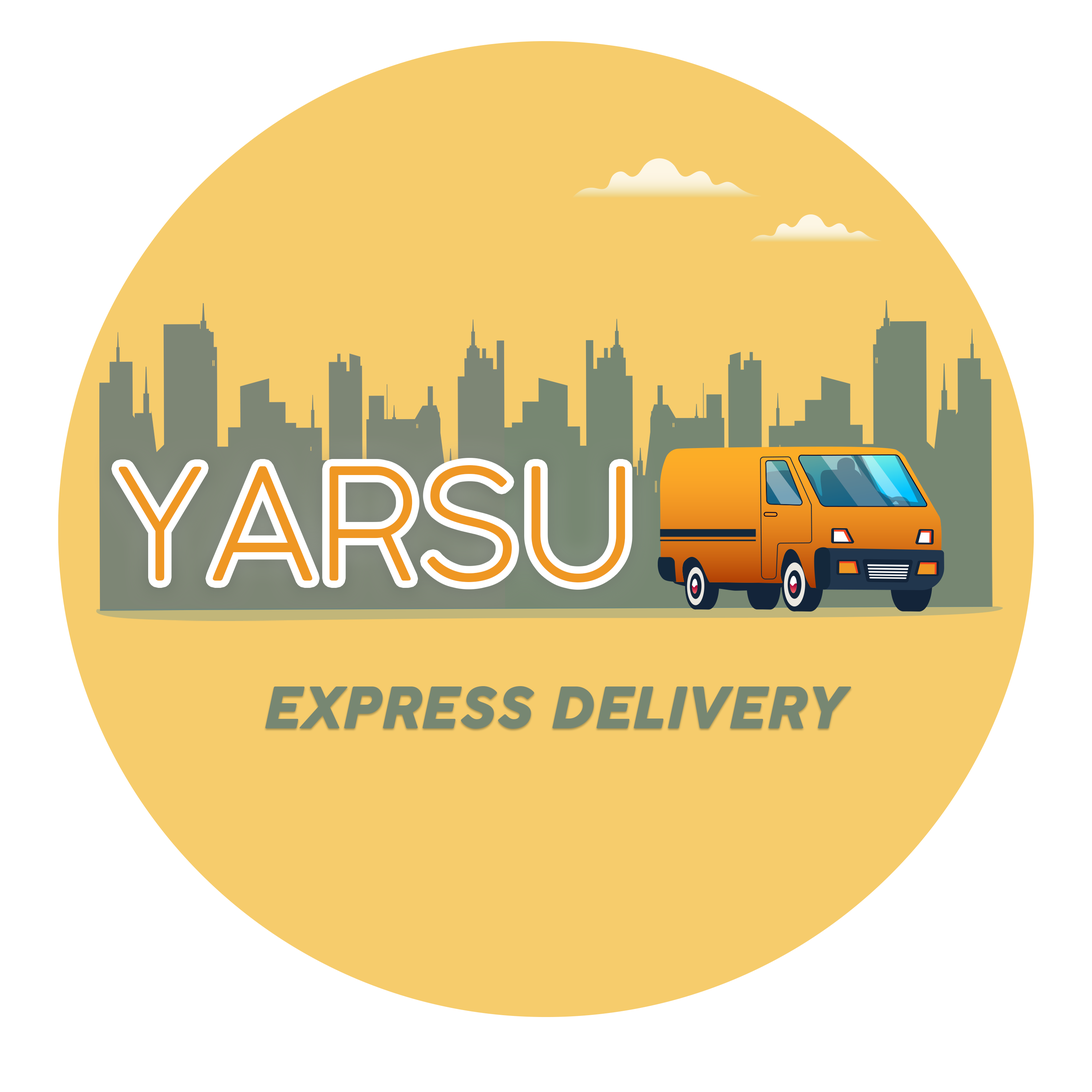
<style>
.page{position:relative;width:1092px;height:1092px;background:#f6cc6c}
.page>*{position:absolute;margin:0}
.t1{font:153.8px "COCOGOOSE-UltraLight";color:#ef9723}
.t2{font:56.6px "CocogoosePro-Italic";color:#778772}
</style>
<div class="page">
<p class="t1" style="left:119px;top:465px;width:506px;height:117px">YARSU</p>
<p class="t2" style="left:265px;top:686px;width:586px;height:43px">EXPRESS DELIVERY</p>
</div>
